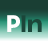
<style>
.page{position:relative;width:48px;height:48px}
.page>*{position:absolute;margin:0}
.t1{font:24px "JumperPERSONALUSEONLY-Bold";color:#1b463a;scale:0.94 1}
.t2{font:24px "JumperPERSONALUSEONLY-Bold";color:#ffffff;scale:0.94 1}
</style>
<div class="page">
<p class="t1" style="left:7px;top:15px;width:35px;height:17px"><span class="t2">P</span>In</p>
</div>
